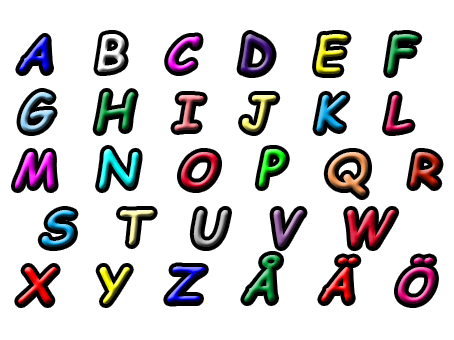
<style>
.page{position:relative;width:454px;height:340px;background:#ffffff}
.page>*{position:absolute;margin:0}
.t1{font:48px "ComicSansMS-BoldItalic"}
</style>
<div class="page">
<p class="t1" style="left:15px;top:34px;width:425px;height:270px;text-align:center">A  B  C  D  E  F <br>G  H  I  J  K  L <br>M  N  O  P  Q  R<br>S  T  U  V  W <br>X  Y  Z  Å  Ä  Ö</p>
</div>
